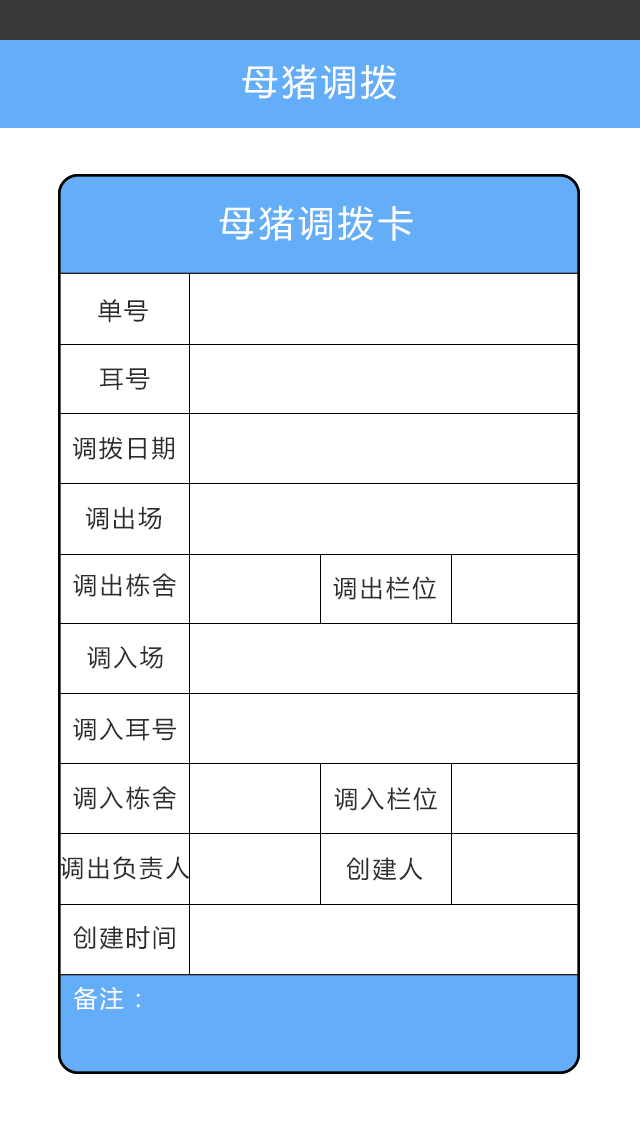
<style>
.page{position:relative;width:640px;height:1136px;background:#ffffff}
.page>*{position:absolute;margin:0}
.t1{font:36px "MicrosoftYaHei";letter-spacing:0.1em;color:#ffffff}
.t2{font:24px "MicrosoftYaHei";letter-spacing:0.1em;color:#2b2b2b}
.t3{font:24px "MicrosoftYaHei";letter-spacing:0.1em;color:#2d2d2d}
.t4{font:24px "MicrosoftYaHei";letter-spacing:0.1em;color:#fefefe}
</style>
<div class="page">
<p class="t1" style="left:242px;top:64px;width:155px;height:36px">母猪调拨</p>
<p class="t1" style="left:219px;top:205px;width:194px;height:36px">母猪调拨卡</p>
<p class="t2" style="left:98px;top:299px;width:50px;height:24px">单号</p>
<p class="t3" style="left:99px;top:368px;width:51px;height:22px">耳号</p>
<p class="t3" style="left:73px;top:436px;width:101px;height:24px">调拨日期</p>
<p class="t3" style="left:86px;top:506px;width:75px;height:24px">调出场</p>
<p class="t3" style="left:73px;top:573px;width:103px;height:24px">调出栋舍</p>
<p class="t3" style="left:333px;top:576px;width:103px;height:24px">调出栏位</p>
<p class="t3" style="left:87px;top:646px;width:76px;height:23px">调入场</p>
<p class="t3" style="left:73px;top:718px;width:103px;height:23px">调入耳号</p>
<p class="t3" style="left:73px;top:786px;width:103px;height:24px">调入栋舍</p>
<p class="t3" style="left:334px;top:787px;width:103px;height:24px">调入栏位</p>
<p class="t3" style="left:60px;top:856px;width:130px;height:24px">调出负责人</p>
<p class="t3" style="left:346px;top:857px;width:77px;height:24px">创建人</p>
<p class="t3" style="left:73px;top:926px;width:102px;height:24px">创建时间</p>
<p class="t4" style="left:73px;top:986px;width:67px;height:24px">备注：</p>
</div>
